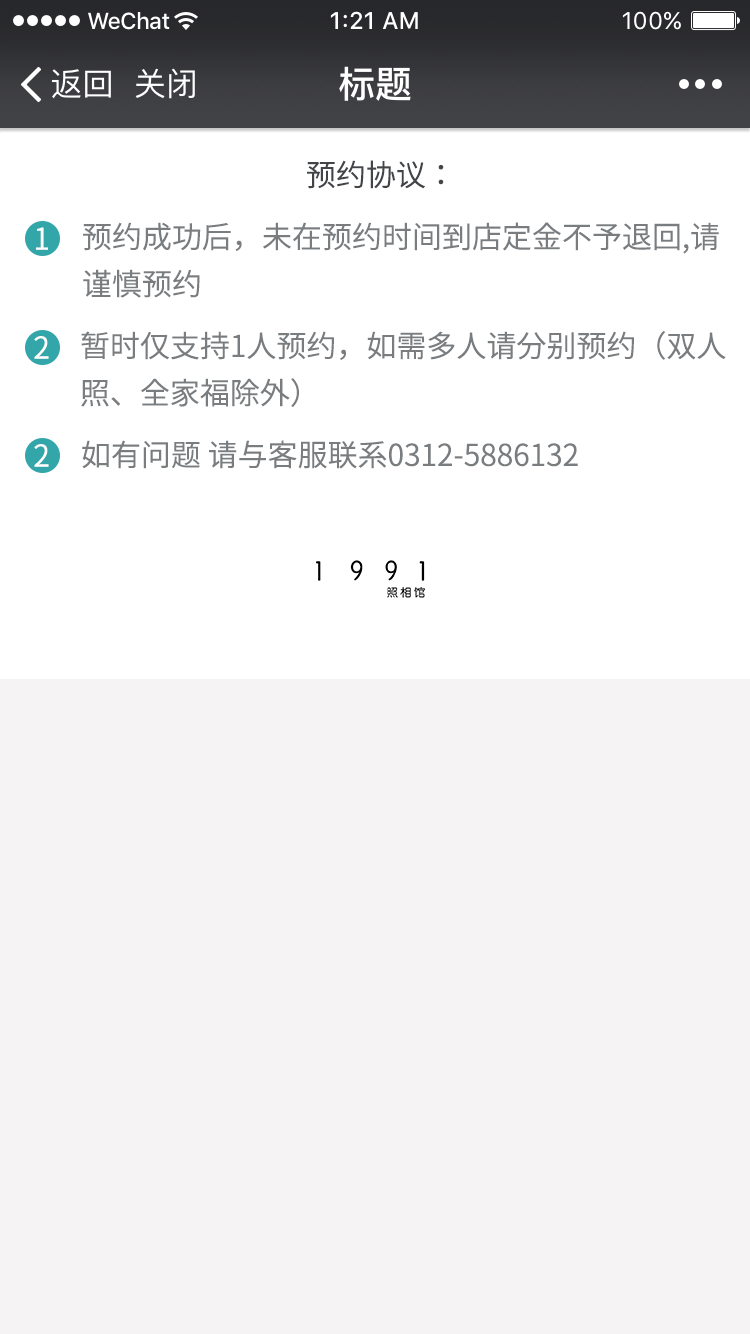
<style>
.page{position:relative;width:750px;height:1334px;background:#f5f3f4}
.page>*{position:absolute;margin:0}
.t1{font:30px "NotoSansCJK-DemiLight";color:#414448}
.t2{font:30px/24px "NotoSansCJK-DemiLight";color:#7a7d80}
.t3{font:30px "NotoSansCJK-DemiLight";color:#ffffff}
.t4{font:30px "NotoSansCJK-DemiLight";color:#7a7d80}
</style>
<div class="page">
<p class="t1" style="left:307px;top:160px;width:137px;height:29px">预约协议：</p>
<p class="t2" style="left:83px;top:222px;width:636px;height:76px">预约成功后，未在预约时间到店定金不予退回,请<br>谨慎预约</p>
<p class="t3" style="left:36px;top:227px;width:12px;height:23px">1</p>
<p class="t3" style="left:34px;top:336px;width:15px;height:23px">2</p>
<p class="t2" style="left:81px;top:331px;width:645px;height:76px">暂时仅支持1人预约，如需多人请分别预约（双人<br>照、全家福除外）</p>
<p class="t3" style="left:34px;top:444px;width:15px;height:23px">2</p>
<p class="t4" style="left:82px;top:440px;width:496px;height:29px">如有问题 请与客服联系0312-5886132</p>
</div>
